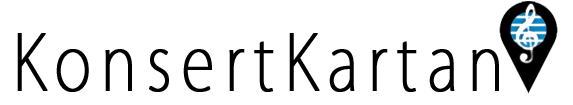
<style>
.page{position:relative;width:573px;height:105px;background:#ffffff}
.page>*{position:absolute;margin:0}
.t1{font:75px "KozGoPro-ExtraLight";letter-spacing:0.14em;color:#000000;font-weight:bold;scale:0.81 1}
</style>
<div class="page">
<p class="t1" style="left:17px;top:33px;width:482px;height:59px">KonsertKartan</p>
</div>
